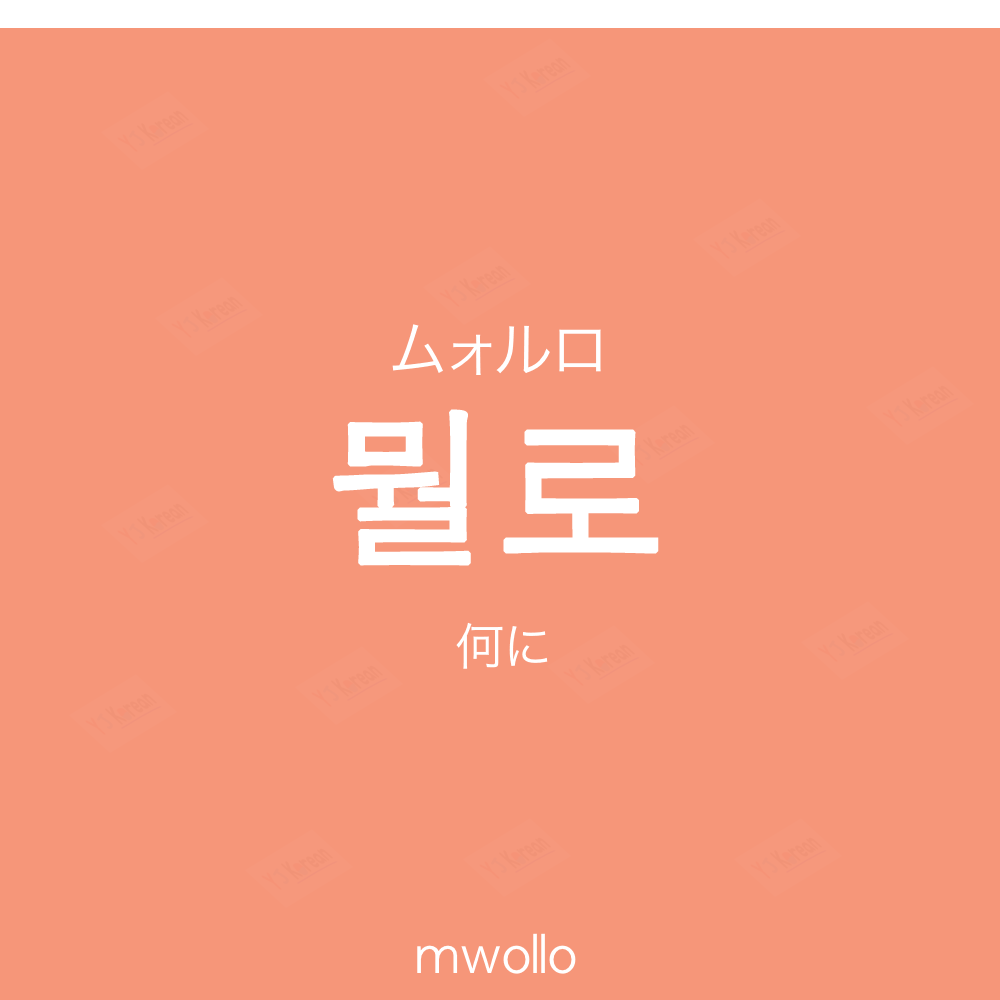
<style>
.page{position:relative;width:1000px;height:1000px;background:#f69679}
.page>*{position:absolute;margin:0}
.t1{font:60px "HiraKakuProN-W3";color:#ffffff;text-transform:uppercase}
.t2{font:170px "AppleGothic";color:#ffffff;font-weight:bold}
.t3{font:50px "HiraKakuProN-W3";color:#ffffff}
.t4{font:50px "AppleGothic";color:#ffffff}
</style>
<div class="page">
<p class="t1" style="left:392px;top:324px;width:209px;height:51px">ムォルロ</p>
<p class="t2" style="left:332px;top:409px;width:327px;height:157px">뭘로</p>
<p class="t3" style="left:456px;top:622px;width:92px;height:47px">何に</p>
<p class="t4" style="left:417px;top:933px;width:159px;height:41px">mwollo</p>
</div>
